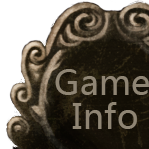
<style>
.page{position:relative;width:149px;height:149px}
.page>*{position:absolute;margin:0}
.t1{font:33.5px "MicrosoftYaHei";letter-spacing:0.02em;color:#8f8574}
.t2{font:34px "MicrosoftYaHei";letter-spacing:0.02em;color:#8f8574}
</style>
<div class="page">
<p class="t1" style="left:55px;top:69px;width:94px;height:26px">Game</p>
<p class="t2" style="left:72px;top:102px;width:65px;height:27px">Info</p>
</div>
